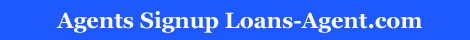
<style>
.page{position:relative;width:470px;height:40px;background:#1e59ff}
.page>*{position:absolute;margin:0}
.t1{font:22px "Georgia-Bold";color:#fbfaff}
</style>
<div class="page">
<p class="t1" style="left:56px;top:11px;width:366px;height:22px">Agents Signup Loans-Agent.com</p>
</div>
